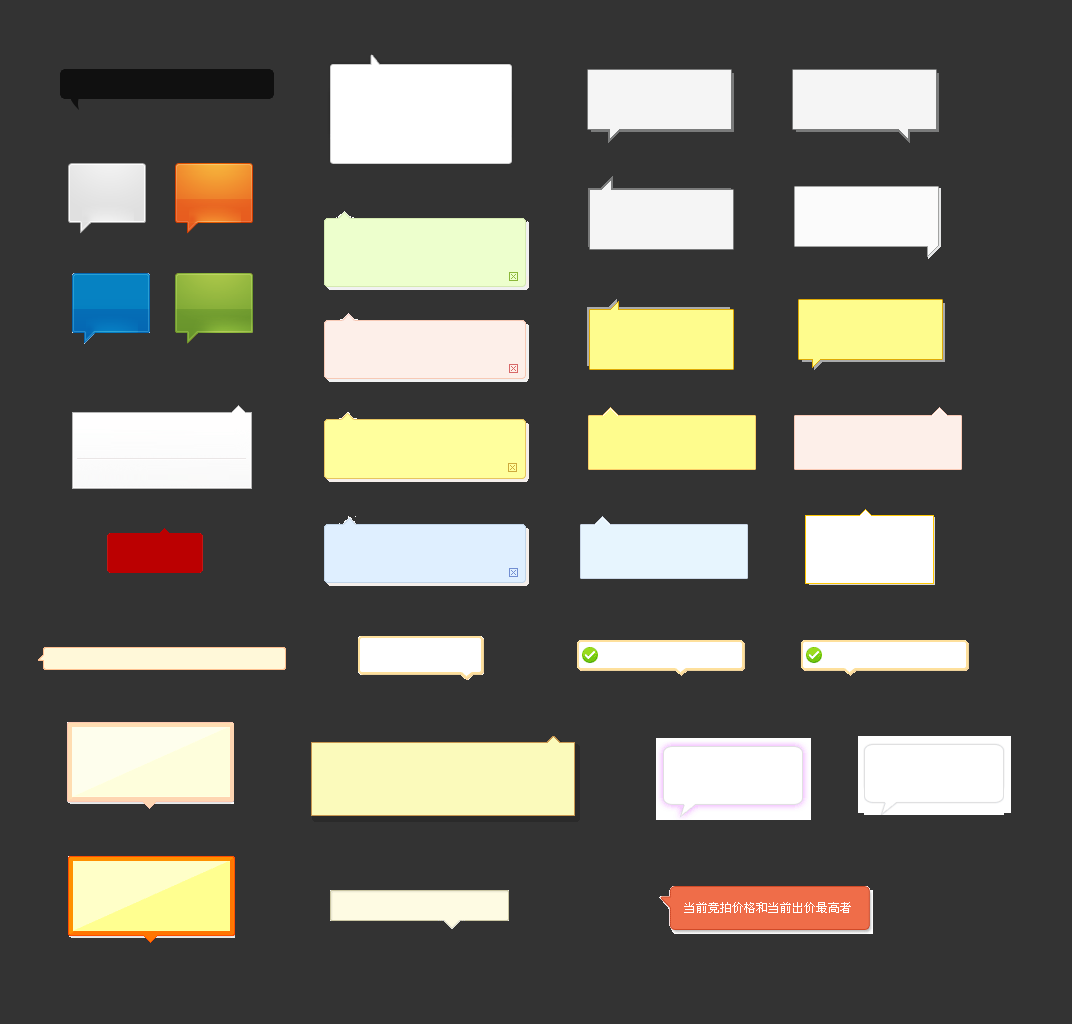
<style>
.page{position:relative;width:1072px;height:1024px;background:#333333}
.page>*{position:absolute;margin:0}
.t1{font:12px "NSimSun";color:#ffffff}
</style>
<div class="page">
<p class="t1" style="left:684px;top:902px;width:167px;height:11px">当前竞拍价格和当前出价最高者</p>
</div>
